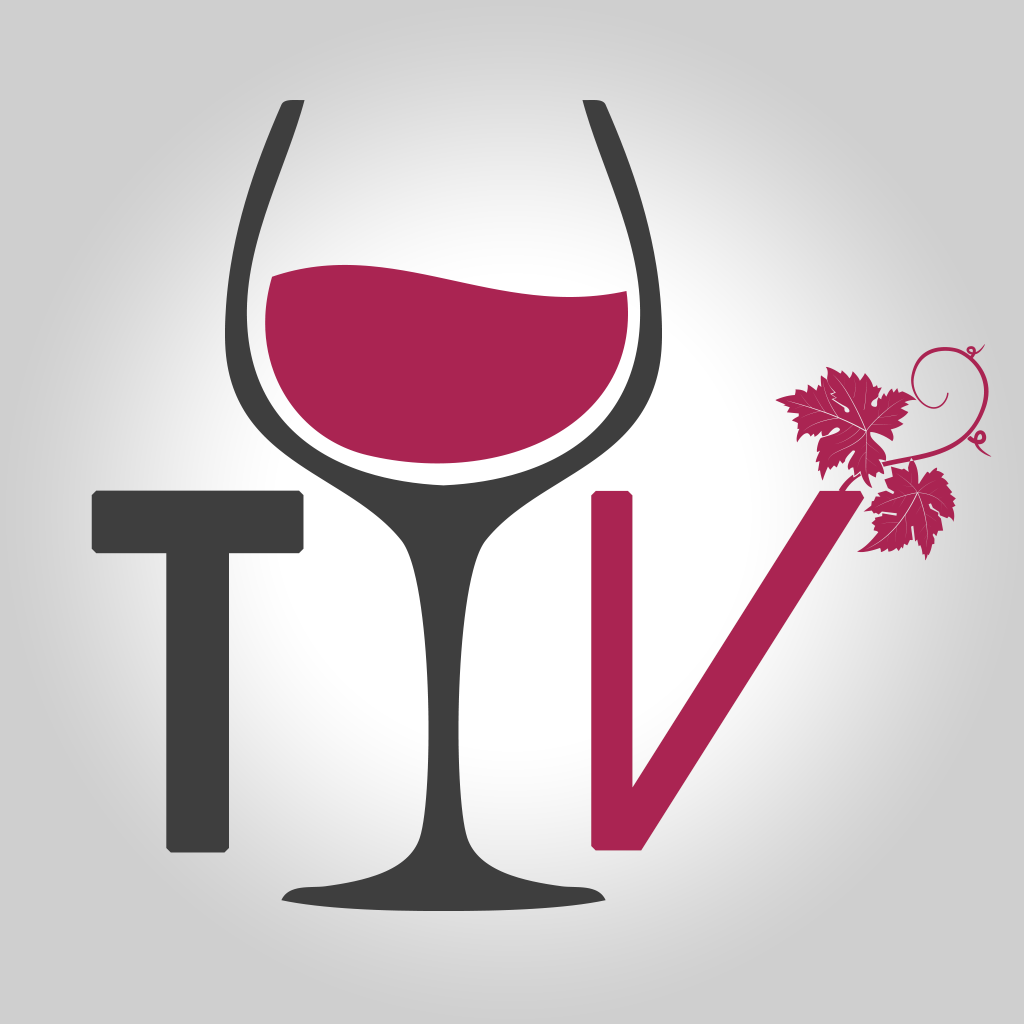
<style>
.page{position:relative;width:1024px;height:1024px;background:#cfcfcf}
.page>*{position:absolute;margin:0}
.t1{font:505px "DolceVitaHeavy-Bold";letter-spacing:0.02em;color:#3e3e3e;text-transform:uppercase;font-weight:bold}
.t2{font:500.3px "DolceVita";letter-spacing:0.02em;color:#aa2452;text-transform:uppercase;font-weight:bold}
</style>
<div class="page">
<p class="t1" style="left:91px;top:490px;width:213px;height:363px">T</p>
<p class="t2" style="left:591px;top:490px;width:274px;height:361px">V</p>
</div>
